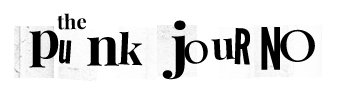
<style>
.page{position:relative;width:360px;height:100px;background:#ffffff}
.page>*{position:absolute;margin:0}
.t1{font:20px "PlayfairDisplay-Bold";color:#000000}
.t2{font:52px "PlayfairDisplay-Bold";color:#000000}
.t3{font:61px "PlayfairDisplay-Bold";color:#000000}
.t4{font:49px "LeagueGothic-Regular";color:#000000}
.t5{font:58px "LeagueGothic-Regular";color:#000000}
.t6{font:48px "TeluguMN";color:#000000}
.t7{font:42px "LeagueGothic-Regular";color:#000000}
.t8{font:54px "PlayfairDisplay-Bold";color:#000000}
.t9{font:42px "PlayfairDisplay-Bold";color:#000000}
.t10{font:48px "Palatino-Roman";color:#000000}
.t11{font:39px "PlayfairDisplay-Bold";color:#000000}
</style>
<div class="page">
<p class="t1" style="left:57px;top:13px;width:29px;height:17px">the</p>
<p class="t2" style="left:29px;top:30px;width:30px;height:38px">p</p>
<p class="t3" style="left:162px;top:20px;width:24px;height:60px">j</p>
<p class="t4" style="left:234px;top:28px;width:16px;height:37px;rotate:2deg">R</p>
<p class="t5" style="left:261px;top:27px;width:19px;height:43px">N</p>
<p class="t6" style="left:280px;top:29px;width:35px;height:33px;rotate:-5deg">O</p>
<p class="t7" style="left:59px;top:40px;width:13px;height:24px;rotate:4deg">u</p>
<p class="t8" style="left:87px;top:37px;width:32px;height:29px">n</p>
<p class="t9" style="left:118px;top:31px;width:25px;height:35px;rotate:3deg">k</p>
<p class="t10" style="left:184px;top:40px;width:24px;height:24px">o</p>
<p class="t11" style="left:211px;top:38px;width:24px;height:22px;rotate:-3deg">u</p>
</div>
